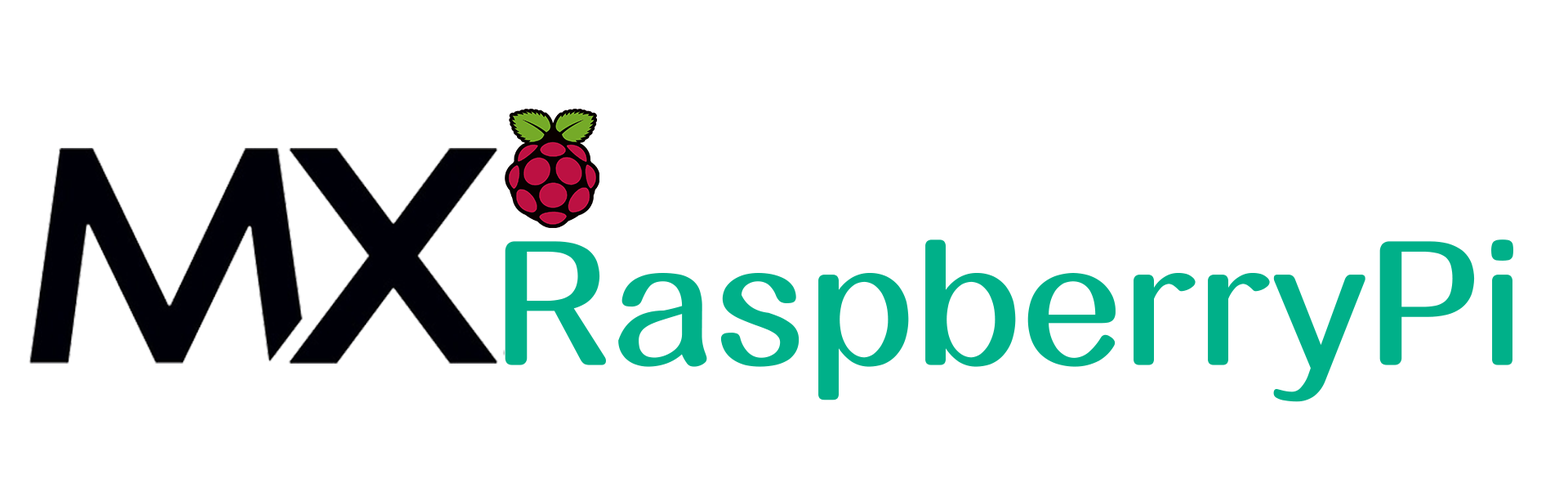
<style>
.page{position:relative;width:1568px;height:483px;background:#ffffff}
.page>*{position:absolute;margin:0}
.t1{font:166.7px "HYRunYuan-GEW";color:#00b089}
</style>
<div class="page">
<p class="t1" style="left:505px;top:239px;width:1008px;height:163px">RaspberryPi</p>
</div>
